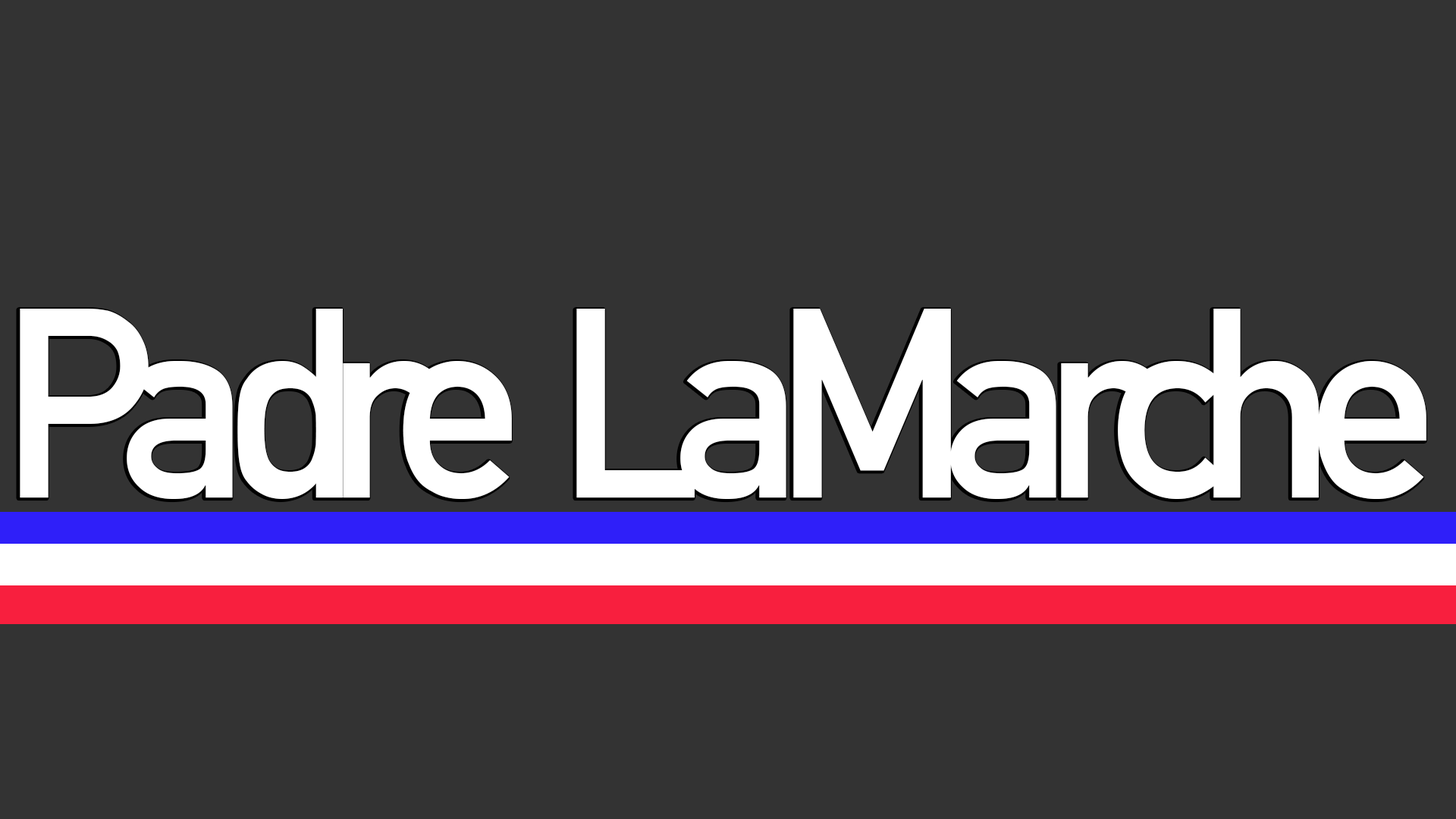
<style>
.page{position:relative;width:1456px;height:819px;background:#333333}
.page>*{position:absolute;margin:0}
.t1{font:265.4px "DINAlternate-Bold";letter-spacing:-0.12em;color:#ffffff}
</style>
<div class="page">
<p class="t1" style="left:20px;top:309px;width:1406px;height:190px">Padre  LaMarche</p>
</div>
